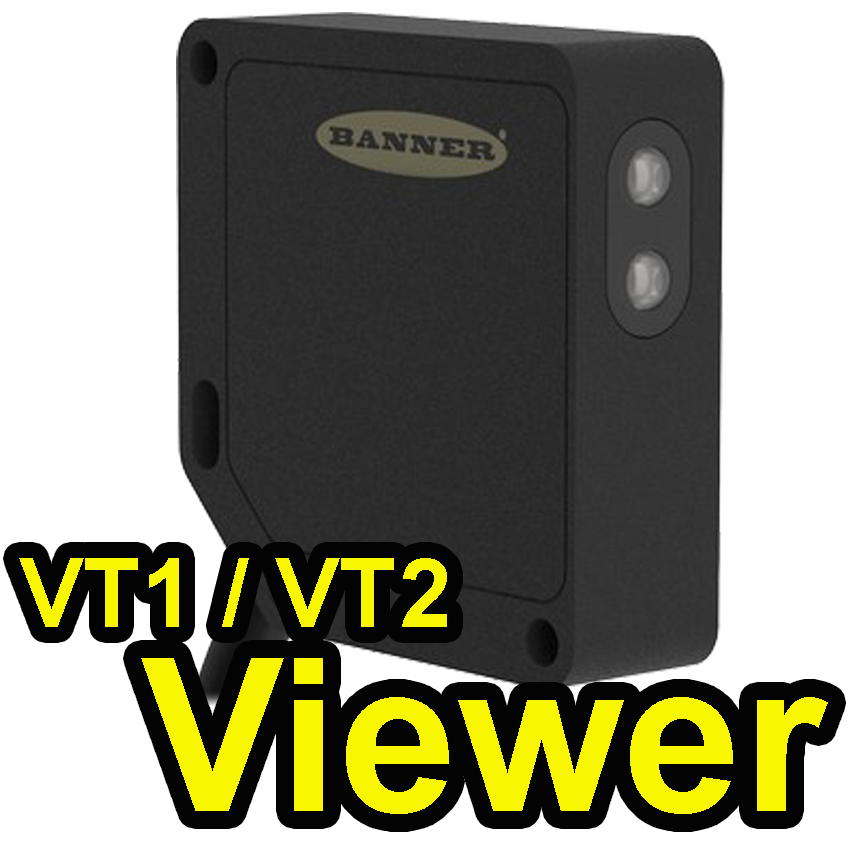
<style>
.page{position:relative;width:866px;height:856px;background:#ffffff}
.page>*{position:absolute;margin:0}
.t1{font:96px "Arial-BoldMT";color:#f9f602}
.t2{font:213.4px "Arial-BoldMT";color:#f9f602}
</style>
<div class="page">
<p class="t1" style="left:19px;top:558px;width:428px;height:69px">VT1 / VT2</p>
<p class="t2" style="left:141px;top:658px;width:687px;height:156px">Viewer</p>
</div>
